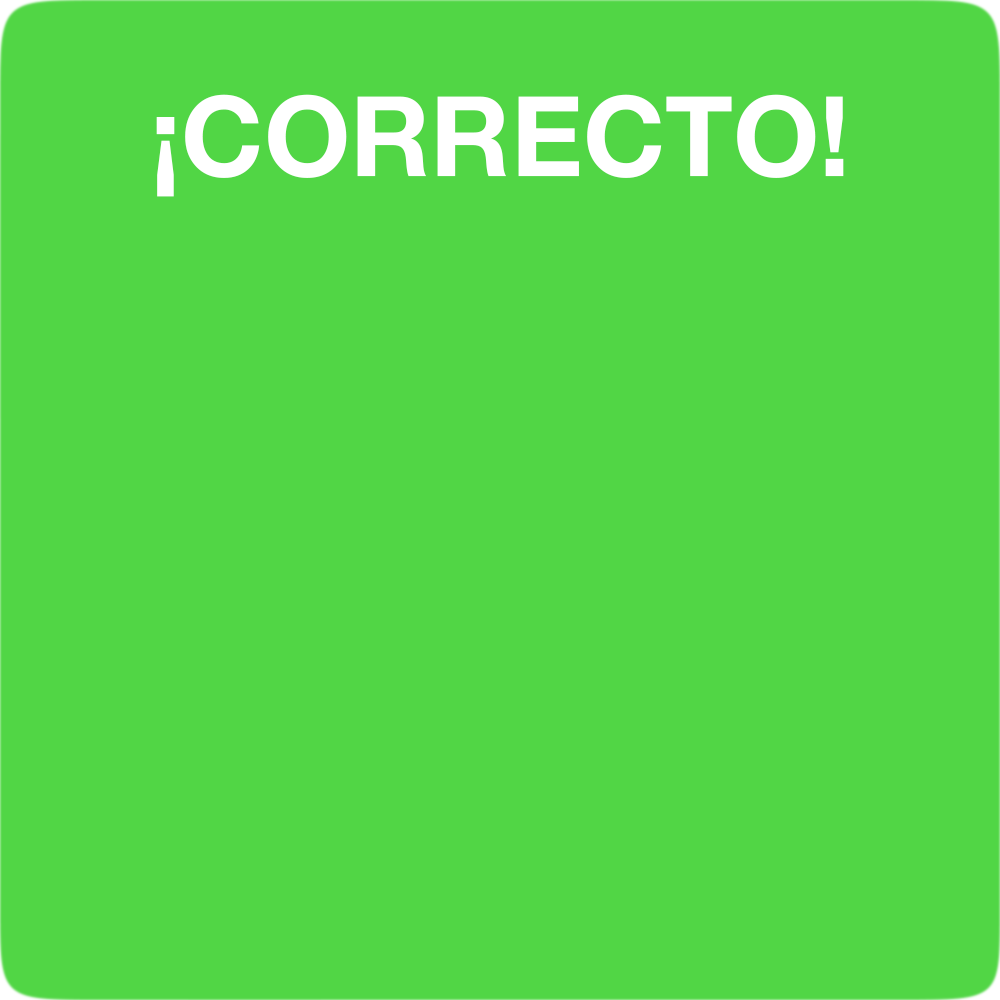
<style>
.page{position:relative;width:1000px;height:1000px;background:#51d645}
.page>*{position:absolute;margin:0}
.t1{font:111.1px "HelveticaNeueBold";color:#ffffff}
</style>
<div class="page">
<p class="t1" style="left:156px;top:94px;width:688px;height:103px">¡CORRECTO!</p>
</div>
